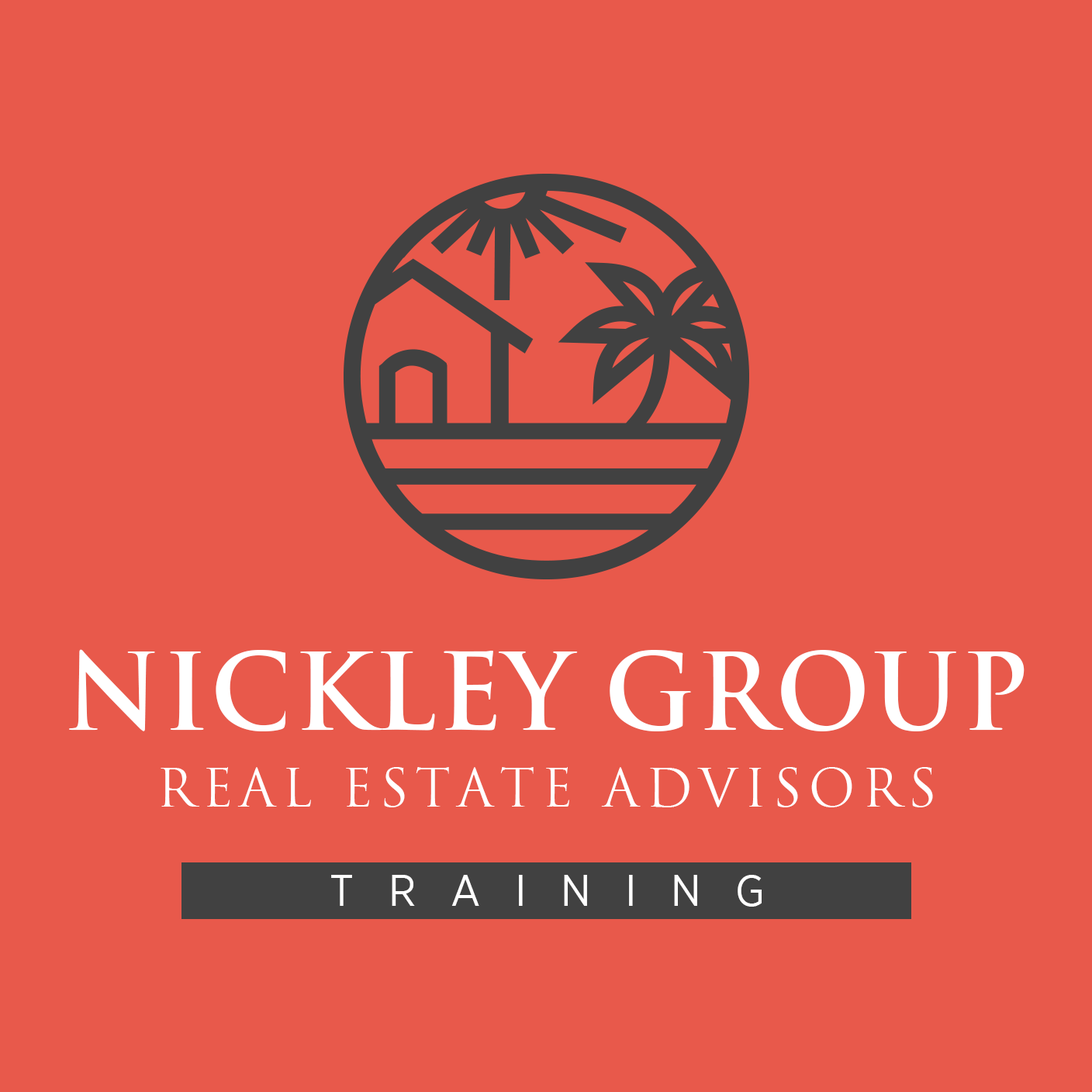
<style>
.page{position:relative;width:1092px;height:1092px;background:#e8594b}
.page>*{position:absolute;margin:0}
.t1{font:104.7px "Trajan-Bold";color:#ffffff}
.t2{font:51.9px "Trajan-Regular";letter-spacing:0.12em;color:#ffffff}
.t3{font:44.3px "GothamNarrow-Book";letter-spacing:0.78em;color:#ffffff}
</style>
<div class="page">
<p class="t1" style="left:69px;top:649px;width:956px;height:82px">Nickley Group</p>
<p class="t2" style="left:161px;top:767px;width:772px;height:40px">Real estate advisors</p>
<p class="t3" style="left:331px;top:875px;width:431px;height:32px">TRAINING</p>
</div>
